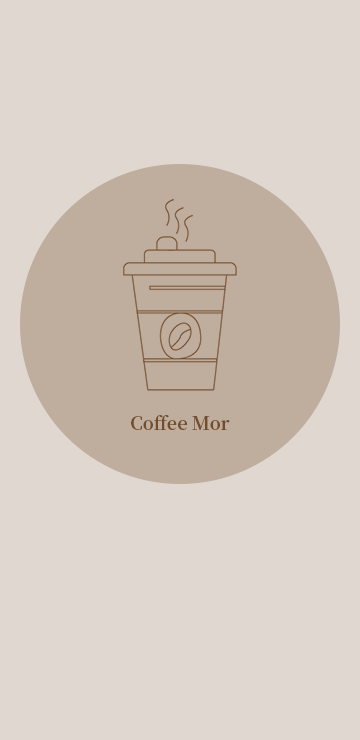
<style>
.page{position:relative;width:360px;height:740px;background:#e0d8d0}
.page>*{position:absolute;margin:0}
.t1{font:18px "NotoSerifKR-Bold";color:#734c2b}
</style>
<div class="page">
<p class="t1" style="left:131px;top:415px;width:99px;height:15px">Coffee Mor</p>
</div>
